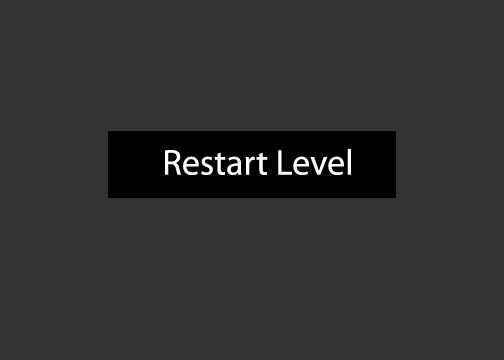
<style>
.page{position:relative;width:504px;height:360px;background:#333333}
.page>*{position:absolute;margin:0}
.t1{font:36px "MyriadPro-Regular";color:#ffffff}
</style>
<div class="page">
<p class="t1" style="left:165px;top:149px;width:186px;height:26px">Restart Level</p>
</div>
